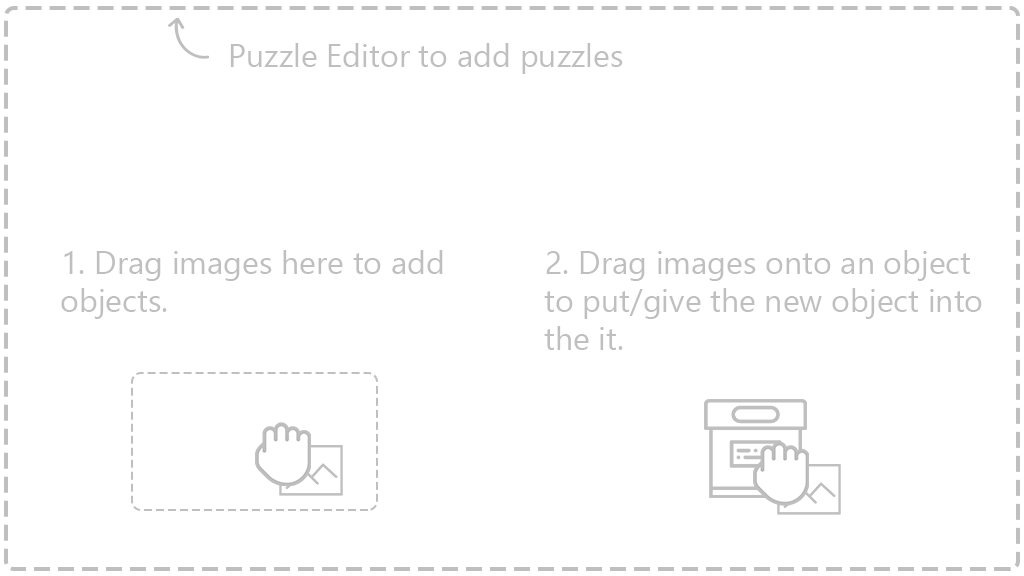
<style>
.page{position:relative;width:1024px;height:576px;background:#ffffff}
.page>*{position:absolute;margin:0}
.t1{font:32px "SegoeUI";color:#bfbfbf}
</style>
<div class="page">
<p class="t1" style="left:230px;top:43px;width:393px;height:31px">Puzzle Editor to add puzzles</p>
<p class="t1" style="left:61px;top:250px;width:382px;height:69px">1. Drag images here to add objects.</p>
<p class="t1" style="left:544px;top:250px;width:438px;height:100px">2. Drag images onto an object to put/give the new object into the it.</p>
</div>
